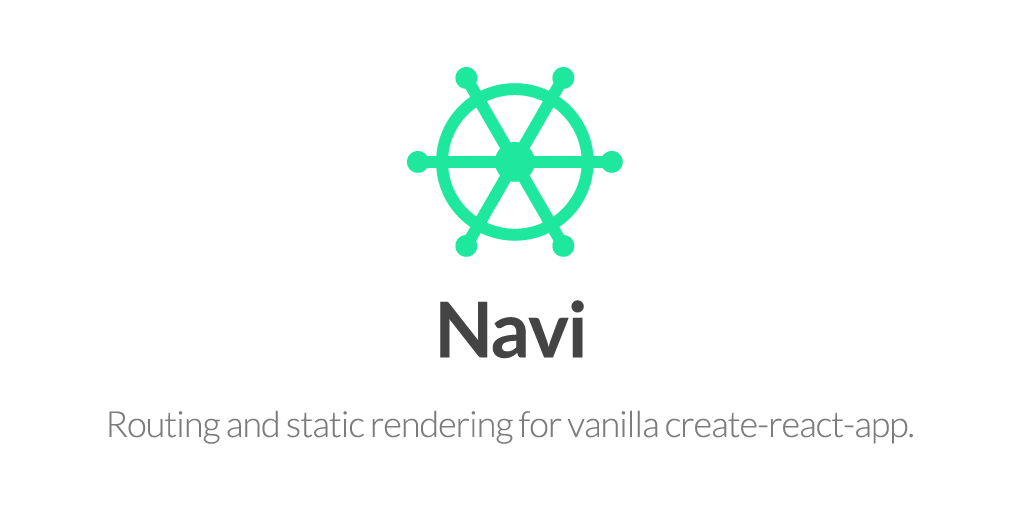
<style>
.page{position:relative;width:1024px;height:512px;background:#ffffff}
.page>*{position:absolute;margin:0}
.t1{font:76.9px "Lato-Bold";letter-spacing:-0.025em;color:#444444}
.t2{font:76.9px "Lato-Bold";letter-spacing:-0.04em;color:#444444}
.t3{font:36px "Lato-Light";letter-spacing:-0.025em;color:#7c7c7c}
</style>
<div class="page">
<p class="t1" style="left:440px;top:300px;width:144px;height:59px"><span class="t2">N</span>avi</p>
<p class="t3" style="left:109px;top:410px;width:804px;height:34px">Routing and static rendering for vanilla create-react-app.</p>
</div>
